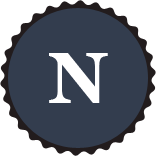
<style>
.page{position:relative;width:156px;height:156px;background:#333d4e}
.page>*{position:absolute;margin:0}
.t1{font:72px "Georgia-Bold";color:#ffffff}
</style>
<div class="page">
<p class="t1" style="left:49px;top:53px;width:59px;height:50px">N</p>
</div>
